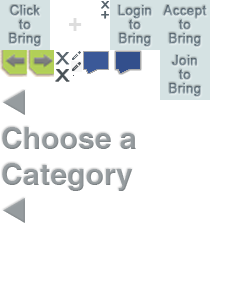
<style>
.page{position:relative;width:240px;height:300px;background:#ffffff}
.page>*{position:absolute;margin:0}
.t1{font:13.3px/14px "ArialMT";color:#6e7e89;font-weight:bold}
.t2{font:9.9px "ArialMT";color:#58646d;font-weight:bold;scale:1.22 1}
.t3{font:12.6px "ArialMT";color:#58646d;font-weight:bold;scale:1.22 1}
.t4{font:30px "HelveticaWorld-Bold";color:#969c9f}
.t5{font:30px "Wingdings3";color:#969c9f}
</style>
<div class="page">
<p class="t1" style="left:9px;top:5px;width:32px;height:42px;text-align:center">Click<br>to<br>Bring</p>
<p class="t2" style="left:101px;top:1px;width:9px;height:8px">X</p>
<p class="t1" style="left:118px;top:5px;width:34px;height:42px;text-align:center">Login<br>to<br>Bring</p>
<p class="t1" style="left:163px;top:5px;width:44px;height:42px;text-align:center">Accept<br>to<br>Bring</p>
<p class="t3" style="left:101px;top:11px;width:8px;height:8px">+</p>
<p class="t1" style="left:169px;top:55px;width:32px;height:42px;text-align:center">Join<br>to<br>Bring</p>
<p class="t4" style="left:2px;top:90px;width:134px;height:133px"><span class="t5">t<br></span>Choose a<br>Category<br><span class="t5">t</span></p>
</div>
